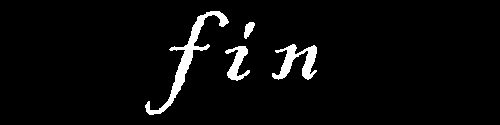
<style>
.page{position:relative;width:500px;height:125px;background:#000000}
.page>*{position:absolute;margin:0}
.t1{font:120px "BlackadderITC-Regular";color:#ffffff}
</style>
<div class="page">
<p class="t1" style="left:145px;top:11px;width:172px;height:104px">f i n</p>
</div>
